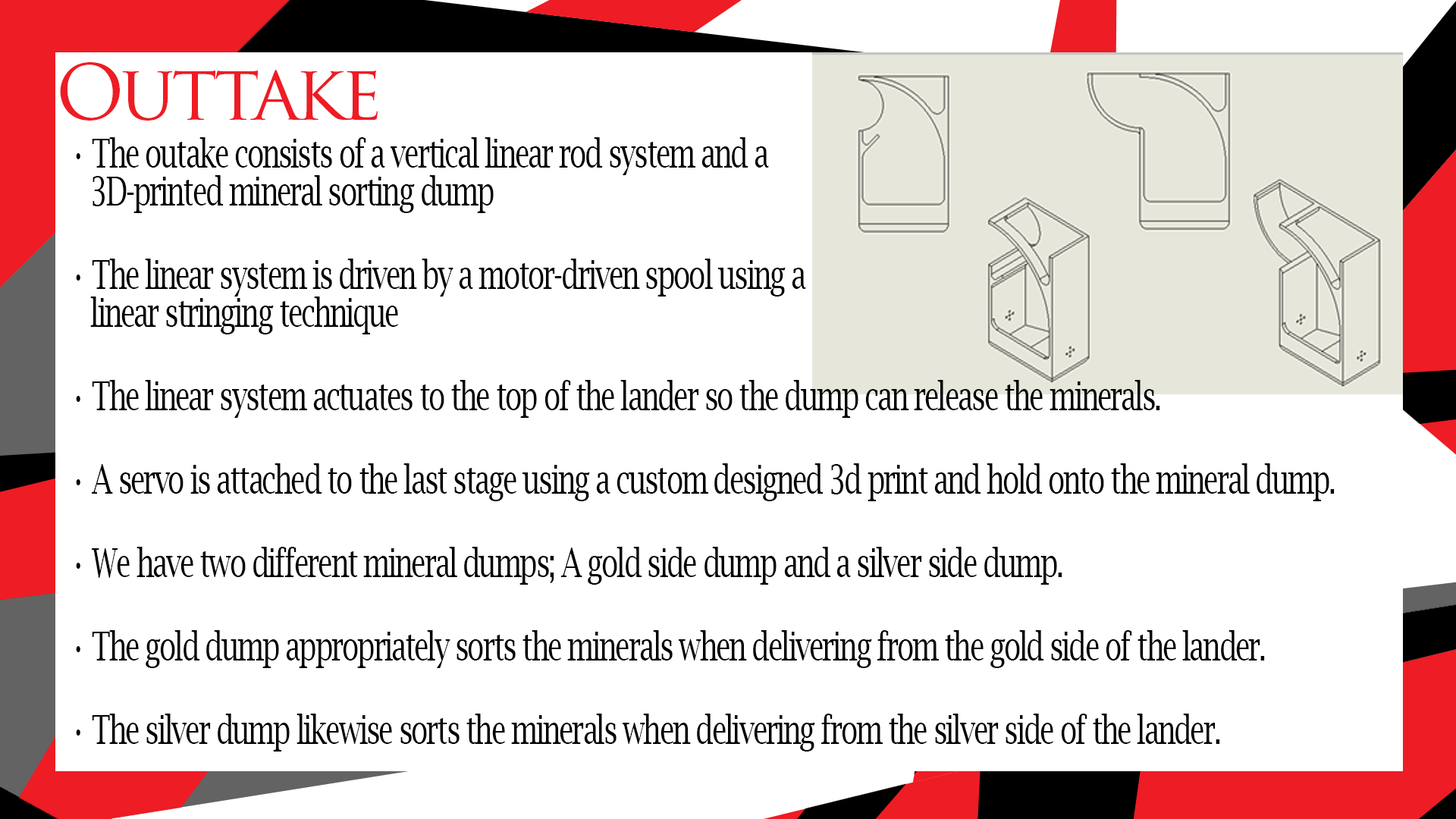
<style>
.page{position:relative;width:1456px;height:819px;background:#ffffff}
.page>*{position:absolute;margin:0}
.t1{font:75.8px "TrajanPro-Regular";letter-spacing:-0.06em;color:#ee1c24}
.t2{font:39.6px/83.4px "LucidaBright";letter-spacing:-0.06em;color:#000000;scale:0.71 1}
.t3{font:39.6px/71.3px "FranklinGothic-Heavy";letter-spacing:-0.06em;color:#000000;scale:0.71 1}
.t4{font:39.6px/98.6px "LucidaBright";letter-spacing:-0.06em;color:#000000;scale:0.71 1}
.t5{font:39.6px/37.9px "LucidaBright";letter-spacing:-0.06em;color:#000000;scale:0.71 1}
</style>
<div class="page">
<p class="t1" style="left:60px;top:62px;width:318px;height:59px">Outtake</p>
<p class="t2" style="left:76px;top:137px;width:1259px;height:614px"><span class="t3"> </span><span class="t4">• The outake consists of a vertical linear rod system and a<br></span><span class="t5">       3D-printed mineral sorting dump <br></span> • The linear system is driven by a motor-driven spool using a<br><span class="t5">       linear stringing technique <br></span> • The linear system actuates to the top of the lander so the dump can release the minerals.<br> • A servo is attached to the last stage using a custom designed 3d print and hold onto the mineral dump.<br> • We have two different mineral dumps; A gold side dump and a silver side dump.<br> • The gold dump appropriately sorts the minerals when delivering from the gold side of the lander.<br>    • The silver dump likewise sorts the minerals when delivering from the silver side of the lander.</p>
</div>
